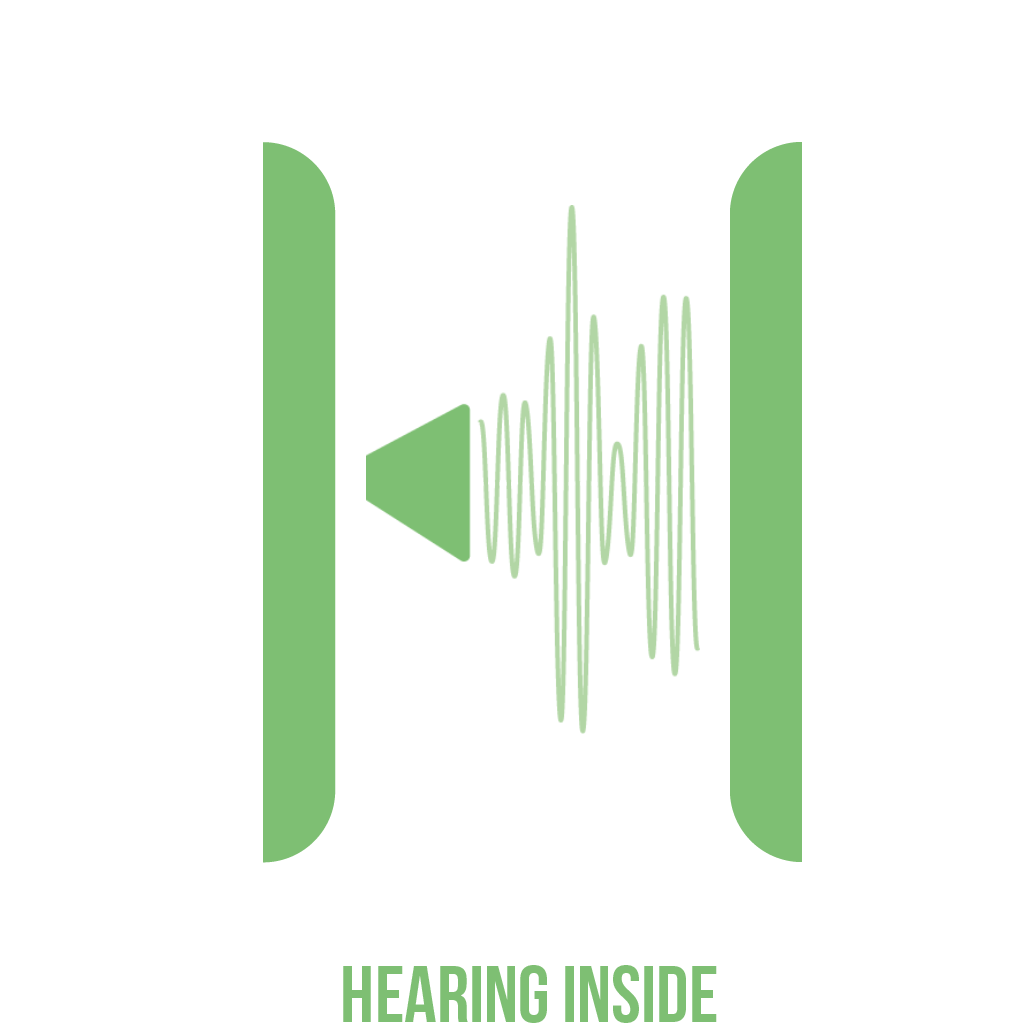
<style>
.page{position:relative;width:1025px;height:1025px;background:#ffffff}
.page>*{position:absolute;margin:0}
.t1{font:80px "BebasNeue";color:#7ebf73}
</style>
<div class="page">
<p class="t1" style="left:343px;top:965px;width:374px;height:58px">Hearing Inside</p>
</div>
